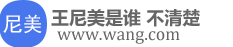
<style>
.page{position:relative;width:233px;height:47px;background:#ffffff}
.page>*{position:absolute;margin:0}
.t1{font:20px "SimHei";color:#ffffff}
.t2{font:18px "MicrosoftYaHei-Bold";color:#666666}
.t3{font:18px "Cambria";color:#666666}
</style>
<div class="page">
<p class="t1" style="left:3px;top:14px;width:39px;height:20px">尼美</p>
<p class="t2" style="left:51px;top:9px;width:149px;height:18px">王尼美是谁 不清楚</p>
<p class="t3" style="left:57px;top:31px;width:123px;height:13px">www.wang.com</p>
</div>
